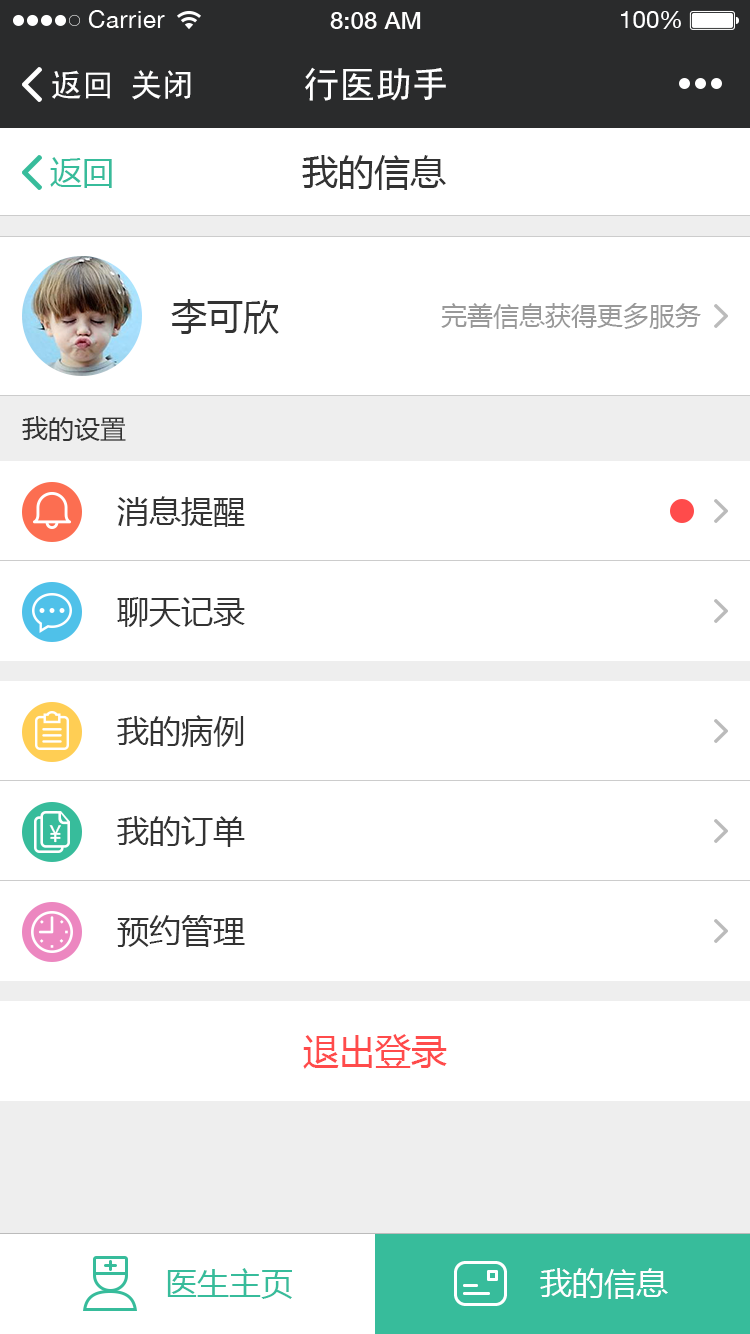
<style>
.page{position:relative;width:750px;height:1334px;background:#ffffff}
.page>*{position:absolute;margin:0}
.t1{font:32px "SimHei";color:#ffffff}
.t2{font:36px "SimHei";color:#ffffff}
.t3{font:32px "MicrosoftYaHei";color:#37bc9b}
.t4{font:36px "MicrosoftYaHei";color:#333333}
.t5{font:26px "MicrosoftYaHei";color:#999999}
.t6{font:26px "MicrosoftYaHei";color:#333333}
.t7{font:32px "MicrosoftYaHei";color:#333333}
.t8{font:22.1px "MicrosoftYaHei";color:#ffffff}
.t9{font:36px "MicrosoftYaHei";color:#ff4b4b}
.t10{font:32px "MicrosoftYaHei";color:#ffffff}
</style>
<div class="page">
<p class="t1" style="left:52px;top:70px;width:58px;height:29px">返回</p>
<p class="t1" style="left:132px;top:70px;width:59px;height:30px">关闭</p>
<p class="t2" style="left:305px;top:67px;width:141px;height:34px">行医助手</p>
<p class="t3" style="left:50px;top:157px;width:62px;height:31px">返回</p>
<p class="t4" style="left:302px;top:155px;width:144px;height:35px">我的信息</p>
<p class="t4" style="left:171px;top:299px;width:108px;height:35px">李可欣</p>
<p class="t5" style="left:441px;top:303px;width:260px;height:26px">完善信息获得更多服务</p>
<p class="t6" style="left:22px;top:416px;width:104px;height:25px">我的设置</p>
<p class="t7" style="left:117px;top:496px;width:128px;height:31px">消息提醒</p>
<p class="t7" style="left:117px;top:597px;width:128px;height:30px">聊天记录</p>
<p class="t7" style="left:117px;top:715px;width:127px;height:32px">我的病例</p>
<p class="t7" style="left:117px;top:816px;width:128px;height:31px">我的订单</p>
<p class="t8" style="left:49px;top:825px;width:12px;height:18px">¥</p>
<p class="t7" style="left:117px;top:915px;width:128px;height:32px">预约管理</p>
<p class="t9" style="left:303px;top:1034px;width:144px;height:35px">退出登录</p>
<p class="t3" style="left:167px;top:1268px;width:125px;height:31px">医生主页</p>
<p class="t10" style="left:540px;top:1268px;width:128px;height:31px">我的信息</p>
</div>
